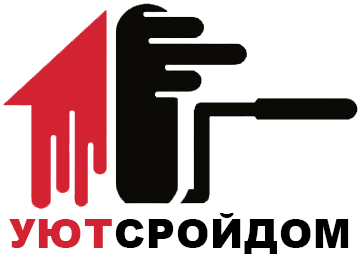
<style>
.page{position:relative;width:360px;height:260px;background:#ffffff}
.page>*{position:absolute;margin:0}
.t1{font:40px "Arial-Black";letter-spacing:0.025em;color:#000000}
.t2{font:40px "Arial-Black";letter-spacing:0.025em;color:#d32232}
</style>
<div class="page">
<p class="t1" style="left:9px;top:213px;width:340px;height:41px"><span class="t2">УЮТ</span>СРОЙДОМ</p>
</div>
